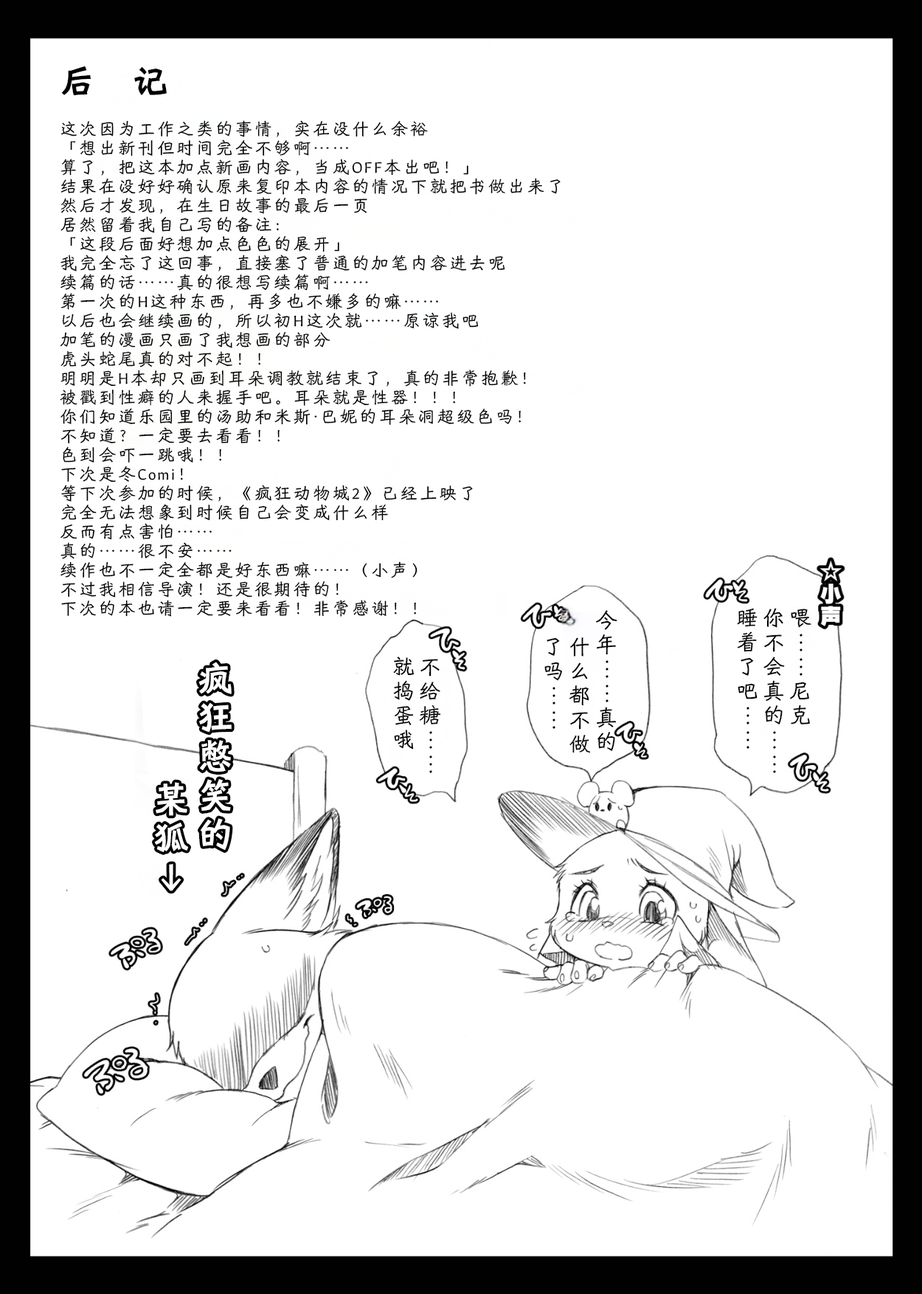
<style>
.page{position:relative;width:922px;height:1294px;background:#ffffff}
.page>*{position:absolute;margin:0}
.t1{font:17.7px/19.2px "HYShiWei55U";letter-spacing:0.1em;color:#000000}
.t2{font:35.4px/22.1px "HYShiWei75U";letter-spacing:1.06em;color:#000000}
.t3{font:22.1px/26.5px "HYShiWei55U";letter-spacing:0.1em;color:#000000}
</style>
<div class="page">
<p class="t1" style="left:60px;top:66px;width:500px;height:551px"><span class="t2">后记<br>  <br></span>这次因为工作之类的事情，实在没什么余裕  <br>「想出新刊但时间完全不够啊……  <br>算了，把这本加点新画内容，当成OFF本出吧！」  <br>结果在没好好确认原来复印本内容的情况下就把书做出来了  <br>然后才发现，在生日故事的最后一页<br>居然留着我自己写的备注：  <br>「这段后面好想加点色色的展开」  <br>我完全忘了这回事，直接塞了普通的加笔内容进去呢  <br>续篇的话……真的很想写续篇啊……  <br>第一次的H这种东西，再多也不嫌多的嘛……  <br>以后也会继续画的，所以初H这次就……原谅我吧  <br>加笔的漫画只画了我想画的部分<br>虎头蛇尾真的对不起！！  <br>明明是H本却只画到耳朵调教就结束了，真的非常抱歉！  <br>被戳到性癖的人来握手吧。耳朵就是性器！！！  <br>你们知道乐园里的汤助和米斯·巴妮的耳朵洞超级色吗！  <br>不知道？一定要去看看！！  <br>色到会吓一跳哦！！  <br>下次是冬Comi！ <br>等下次参加的时候，《疯狂动物城2》已经上映了  <br>完全无法想象到时候自己会变成什么样<br>反而有点害怕……<br>真的……很不安……  <br>续作也不一定全都是好东西嘛……（小声）  <br>不过我相信导演！还是很期待的！  <br>下次的本也请一定要来看看！非常感谢！！</p>
<p class="t3" style="left:544px;top:610px;width:73px;height:143px">今年……真的<br>    什么都不做<br>    了吗……</p>
<p class="t3" style="left:737px;top:608px;width:74px;height:165px">喂……尼克<br>你不会真的……<br>睡着了吧……</p>
<p class="t3" style="left:393px;top:656px;width:48px;height:117px">不给糖……<br>就捣蛋哦</p>
</div>
